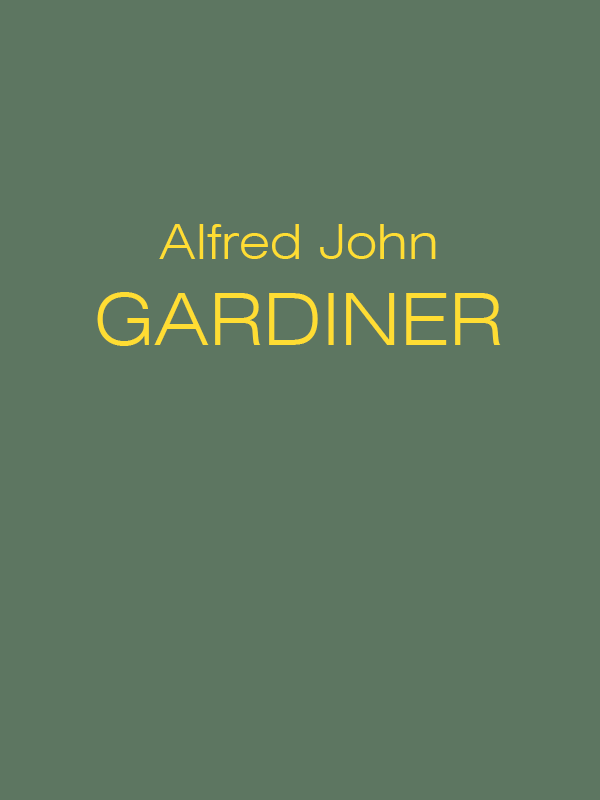
<style>
.page{position:relative;width:600px;height:800px;background:#5d7661}
.page>*{position:absolute;margin:0}
.t1{font:48px "Swiss721BT-LightExtended";color:#ffdd33}
.t2{font:72px "Swiss721BT-LightExtended";color:#ffdd33}
</style>
<div class="page">
<p class="t1" style="left:97px;top:224px;width:404px;height:122px;text-align:center">Alfred John<br><span class="t2">GARDINER</span></p>
</div>
